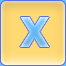
<style>
.page{position:relative;width:66px;height:66px}
.page>*{position:absolute;margin:0}
.t1{font:41px "Tahoma-Bold"}
</style>
<div class="page">
<p class="t1" style="left:20px;top:17px;width:29px;height:30px">Х</p>
<p class="t1" style="left:20px;top:17px;width:29px;height:30px">Х</p>
</div>
